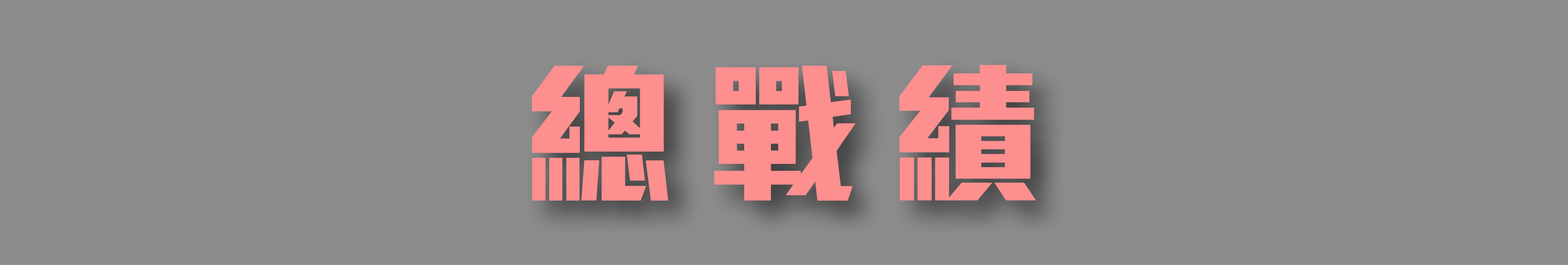
<style>
.page{position:relative;width:1568px;height:265px;background:#8c8c8c}
.page>*{position:absolute;margin:0}
.t1{font:153.1px "MStiffHeiHK-UltraBold";letter-spacing:0.2em;color:#fd8f8f}
</style>
<div class="page">
<p class="t1" style="left:532px;top:65px;width:504px;height:136px">總戰績</p>
</div>
